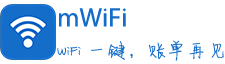
<style>
.page{position:relative;width:225px;height:64px;background:#ffffff}
.page>*{position:absolute;margin:0}
.t1{font:26.7px "MyriadPro-Regular";color:#136dc9}
.t2{font:20px "FZJLJW--GB1-0";color:#136dc9}
</style>
<div class="page">
<p class="t1" style="left:59px;top:8px;width:67px;height:19px">mWiFi</p>
<p class="t2" style="left:57px;top:40px;width:167px;height:21px">WiFi 一键，账单再见</p>
</div>
